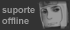
<style>
.page{position:relative;width:70px;height:30px;background:#333333}
.page>*{position:absolute;margin:0}
.t1{font:9px "Arial-BoldMT";color:#9a9a9a}
</style>
<div class="page">
<p class="t1" style="left:2px;top:6px;width:33px;height:18px">suporte<br>offline</p>
</div>
